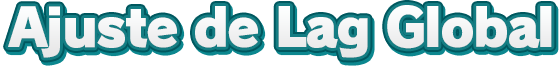
<style>
.page{position:relative;width:560px;height:66px;background:#ffffff}
.page>*{position:absolute;margin:0}
.t1{font:52px "RodinPro-UB";letter-spacing:-0.039em;color:#f2f2f3}
</style>
<div class="page">
<p class="t1" style="left:8px;top:5px;width:544px;height:53px">Ajuste de Lag Global</p>
</div>
